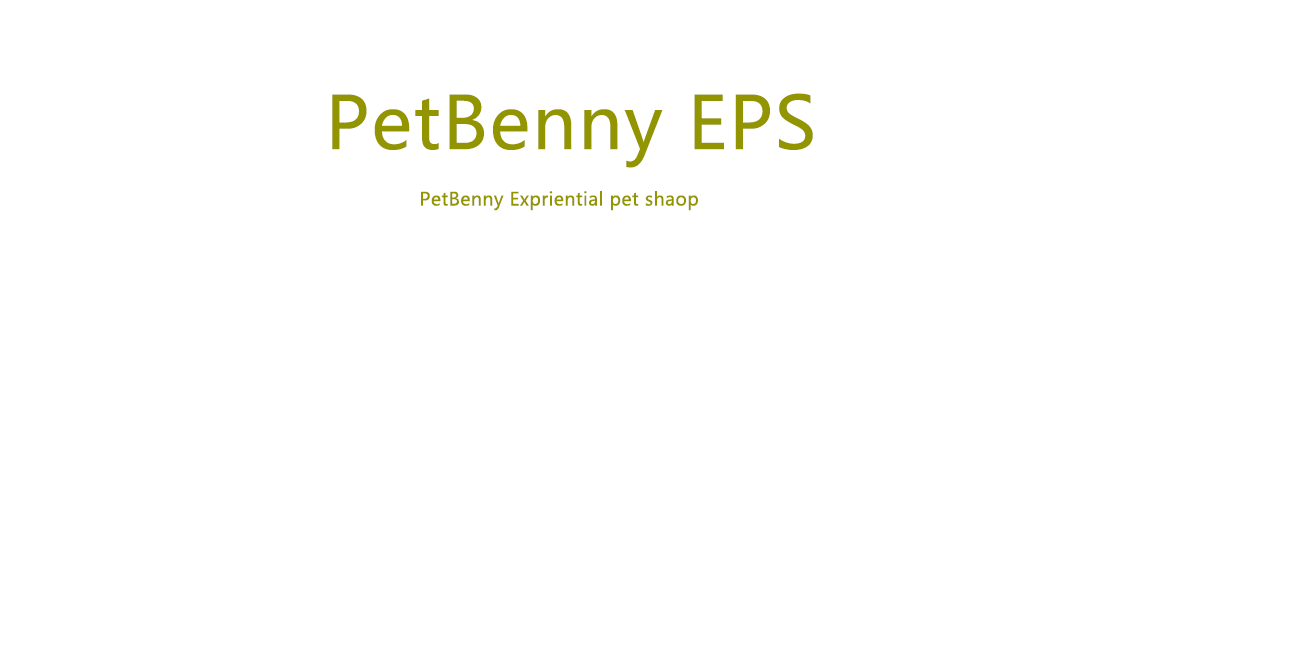
<style>
.page{position:relative;width:1300px;height:660px;background:#ffffff}
.page>*{position:absolute;margin:0}
.t1{font:72px "MicrosoftYaHei";letter-spacing:0.025em;color:#929500}
.t2{font:18.1px "MicrosoftYaHei";letter-spacing:0.025em;color:#929500}
</style>
<div class="page">
<p class="t1" style="left:332px;top:93px;width:481px;height:75px">PetBenny EPS<br>efafd</p>
<p class="t2" style="left:421px;top:191px;width:277px;height:20px">PetBenny Expriential pet shaop</p>
</div>
